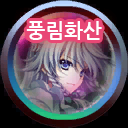
<style>
.page{position:relative;width:128px;height:128px}
.page>*{position:absolute;margin:0}
.t1{font:20px "NanumGothicBold";color:#ffffff}
</style>
<div class="page">
<p class="t1" style="left:26px;top:21px;width:76px;height:19px">풍림화산</p>
</div>
